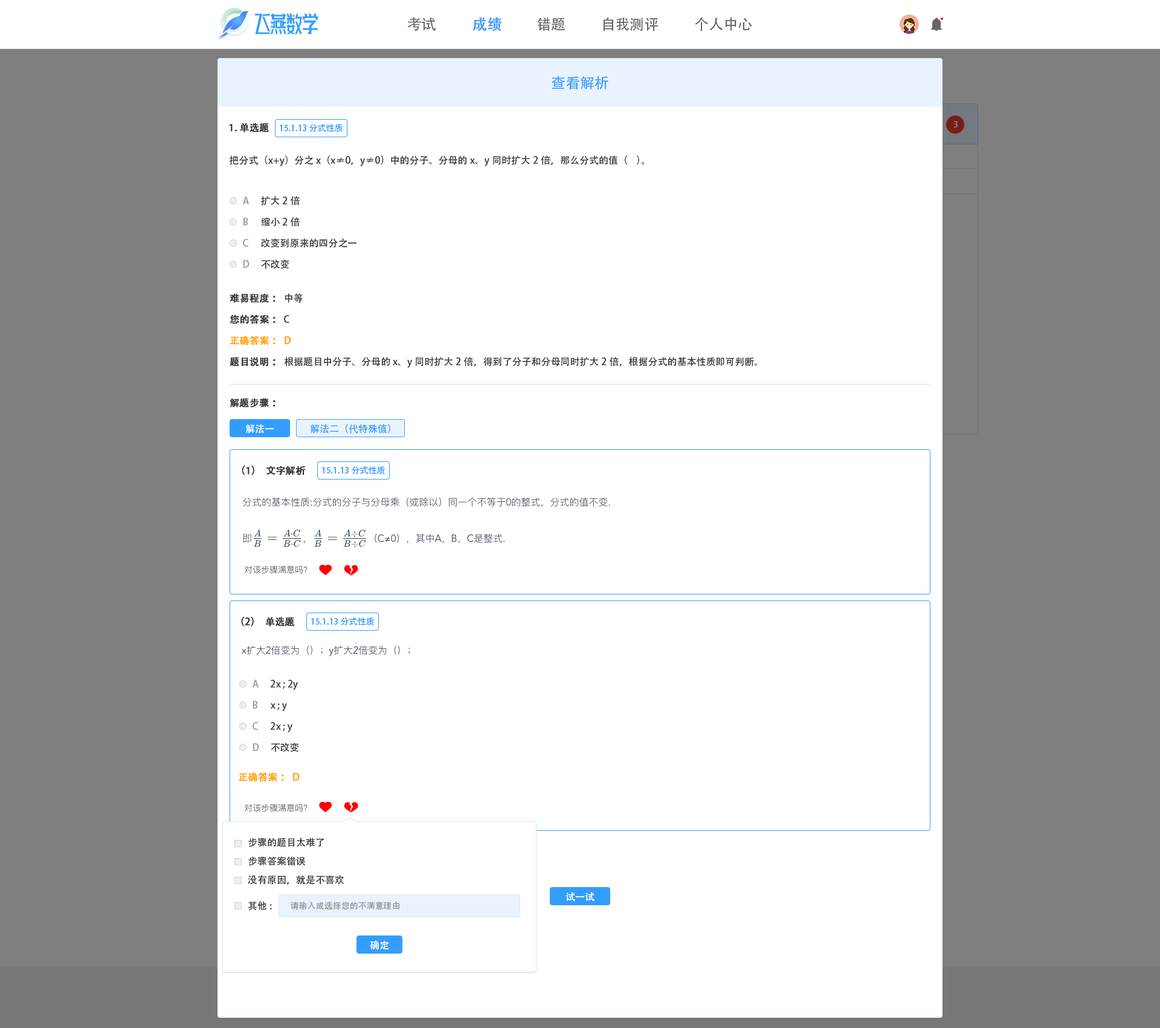
<style>
.page{position:relative;width:1160px;height:1028px;background:#ffffff}
.page>*{position:absolute;margin:0}
.t1{font:14.5px "AdobeHeitiStd-Regular";color:#666666}
.t2{font:14.5px "AdobeHeitiStd-Regular";color:#409eff;font-weight:bold}
.t3{font:14.5px "AdobeHeitiStd-Regular";color:#339dff}
.t4{font:9.7px "AdobeHeitiStd-Regular";color:#333333;font-weight:bold}
.t5{font:8.5px "AdobeHeitiStd-Regular";color:#339dff}
.t6{font:8.5px "AdobeHeitiStd-Regular";color:#7f7f7f}
.t7{font:9.7px "AdobeHeitiStd-Regular";color:#333333}
.t8{font:9.7px "AdobeHeitiStd-Regular";color:#999999}
.t9{font:9.7px "AdobeHeitiStd-Regular";color:#fea300;font-weight:bold}
.t10{font:9.7px "AdobeHeitiStd-Regular";color:#ffffff}
.t11{font:9.7px "AdobeHeitiStd-Regular";color:#339dff}
.t12{font:8.5px "AdobeHeitiStd-Regular";color:#999999}
</style>
<div class="page">
<p class="t1" style="left:407px;top:17px;width:29px;height:14px">考试</p>
<p class="t2" style="left:473px;top:17px;width:29px;height:14px">成绩</p>
<p class="t1" style="left:537px;top:18px;width:28px;height:13px">错题</p>
<p class="t1" style="left:603px;top:17px;width:55px;height:14px">自我测评</p>
<p class="t1" style="left:695px;top:17px;width:58px;height:14px">个人中心</p>
<p class="t3" style="left:552px;top:76px;width:57px;height:13px">查看解析</p>
<p class="t4" style="left:229px;top:123px;width:41px;height:9px">1.单选题</p>
<p class="t5" style="left:280px;top:124px;width:63px;height:8px">15.1.13分式性质</p>
<p class="t6" style="left:954px;top:121px;width:4px;height:7px">3</p>
<p class="t7" style="left:230px;top:155px;width:414px;height:11px">把分式（x+y）分之x（x≠0，y≠0）中的分子、分母的x、y同时扩大2倍，那么分式的值（    ）。</p>
<p class="t8" style="left:243px;top:196px;width:6px;height:8px">A</p>
<p class="t7" style="left:261px;top:196px;width:39px;height:10px">扩大2倍</p>
<p class="t8" style="left:243px;top:218px;width:5px;height:7px">B</p>
<p class="t7" style="left:261px;top:217px;width:39px;height:10px">缩小2倍</p>
<p class="t8" style="left:243px;top:239px;width:5px;height:8px">C</p>
<p class="t7" style="left:261px;top:238px;width:96px;height:10px">改变到原来的四分之一</p>
<p class="t8" style="left:243px;top:260px;width:7px;height:8px">D</p>
<p class="t7" style="left:261px;top:259px;width:29px;height:10px">不改变</p>
<p class="t4" style="left:230px;top:293px;width:73px;height:10px">难易程度：<span class="t7"> 中等</span></p>
<p class="t4" style="left:230px;top:314px;width:60px;height:10px">您的答案：<span class="t7"> C</span></p>
<p class="t9" style="left:230px;top:335px;width:61px;height:10px">正确答案： D</p>
<p class="t7" style="left:230px;top:357px;width:527px;height:10px"><span class="t4">题目说明： </span>根据题目中分子、分母的x、y同时扩大2倍，得到了分子和分母同时扩大2倍，根据分式的基本性质即可判断。</p>
<p class="t4" style="left:230px;top:398px;width:46px;height:9px">解题步骤：</p>
<p class="t10" style="left:245px;top:424px;width:29px;height:9px">解法一</p>
<p class="t11" style="left:310px;top:424px;width:80px;height:9px">解法二（代特殊值）</p>
<p class="t4" style="left:242px;top:465px;width:64px;height:10px">（1）文字解析</p>
<p class="t5" style="left:322px;top:466px;width:63px;height:8px">15.1.13分式性质</p>
<p class="t4" style="left:241px;top:617px;width:54px;height:9px">（2）单选题</p>
<p class="t5" style="left:311px;top:617px;width:63px;height:9px">15.1.13分式性质</p>
<p class="t8" style="left:253px;top:679px;width:6px;height:8px">A</p>
<p class="t7" style="left:270px;top:679px;width:28px;height:11px">2x ; 2y</p>
<p class="t8" style="left:253px;top:701px;width:5px;height:7px">B</p>
<p class="t7" style="left:271px;top:703px;width:16px;height:8px">x ; y</p>
<p class="t8" style="left:253px;top:722px;width:5px;height:8px">C</p>
<p class="t7" style="left:270px;top:722px;width:23px;height:10px">2x ; y</p>
<p class="t8" style="left:253px;top:743px;width:6px;height:8px">D</p>
<p class="t7" style="left:271px;top:742px;width:28px;height:10px">不改变</p>
<p class="t9" style="left:239px;top:772px;width:61px;height:10px">正确答案： D</p>
<p class="t7" style="left:248px;top:837px;width:77px;height:10px">步骤的题目太难了</p>
<p class="t7" style="left:248px;top:856px;width:57px;height:10px">步骤答案错误</p>
<p class="t7" style="left:248px;top:875px;width:96px;height:9px">没有原因，就是不喜欢</p>
<p class="t10" style="left:566px;top:892px;width:29px;height:9px">试一试</p>
<p class="t7" style="left:248px;top:901px;width:24px;height:9px">其他:</p>
<p class="t12" style="left:291px;top:901px;width:109px;height:9px">请输入或选择您的不满意理由</p>
<p class="t10" style="left:370px;top:940px;width:19px;height:10px">确定</p>
</div>
